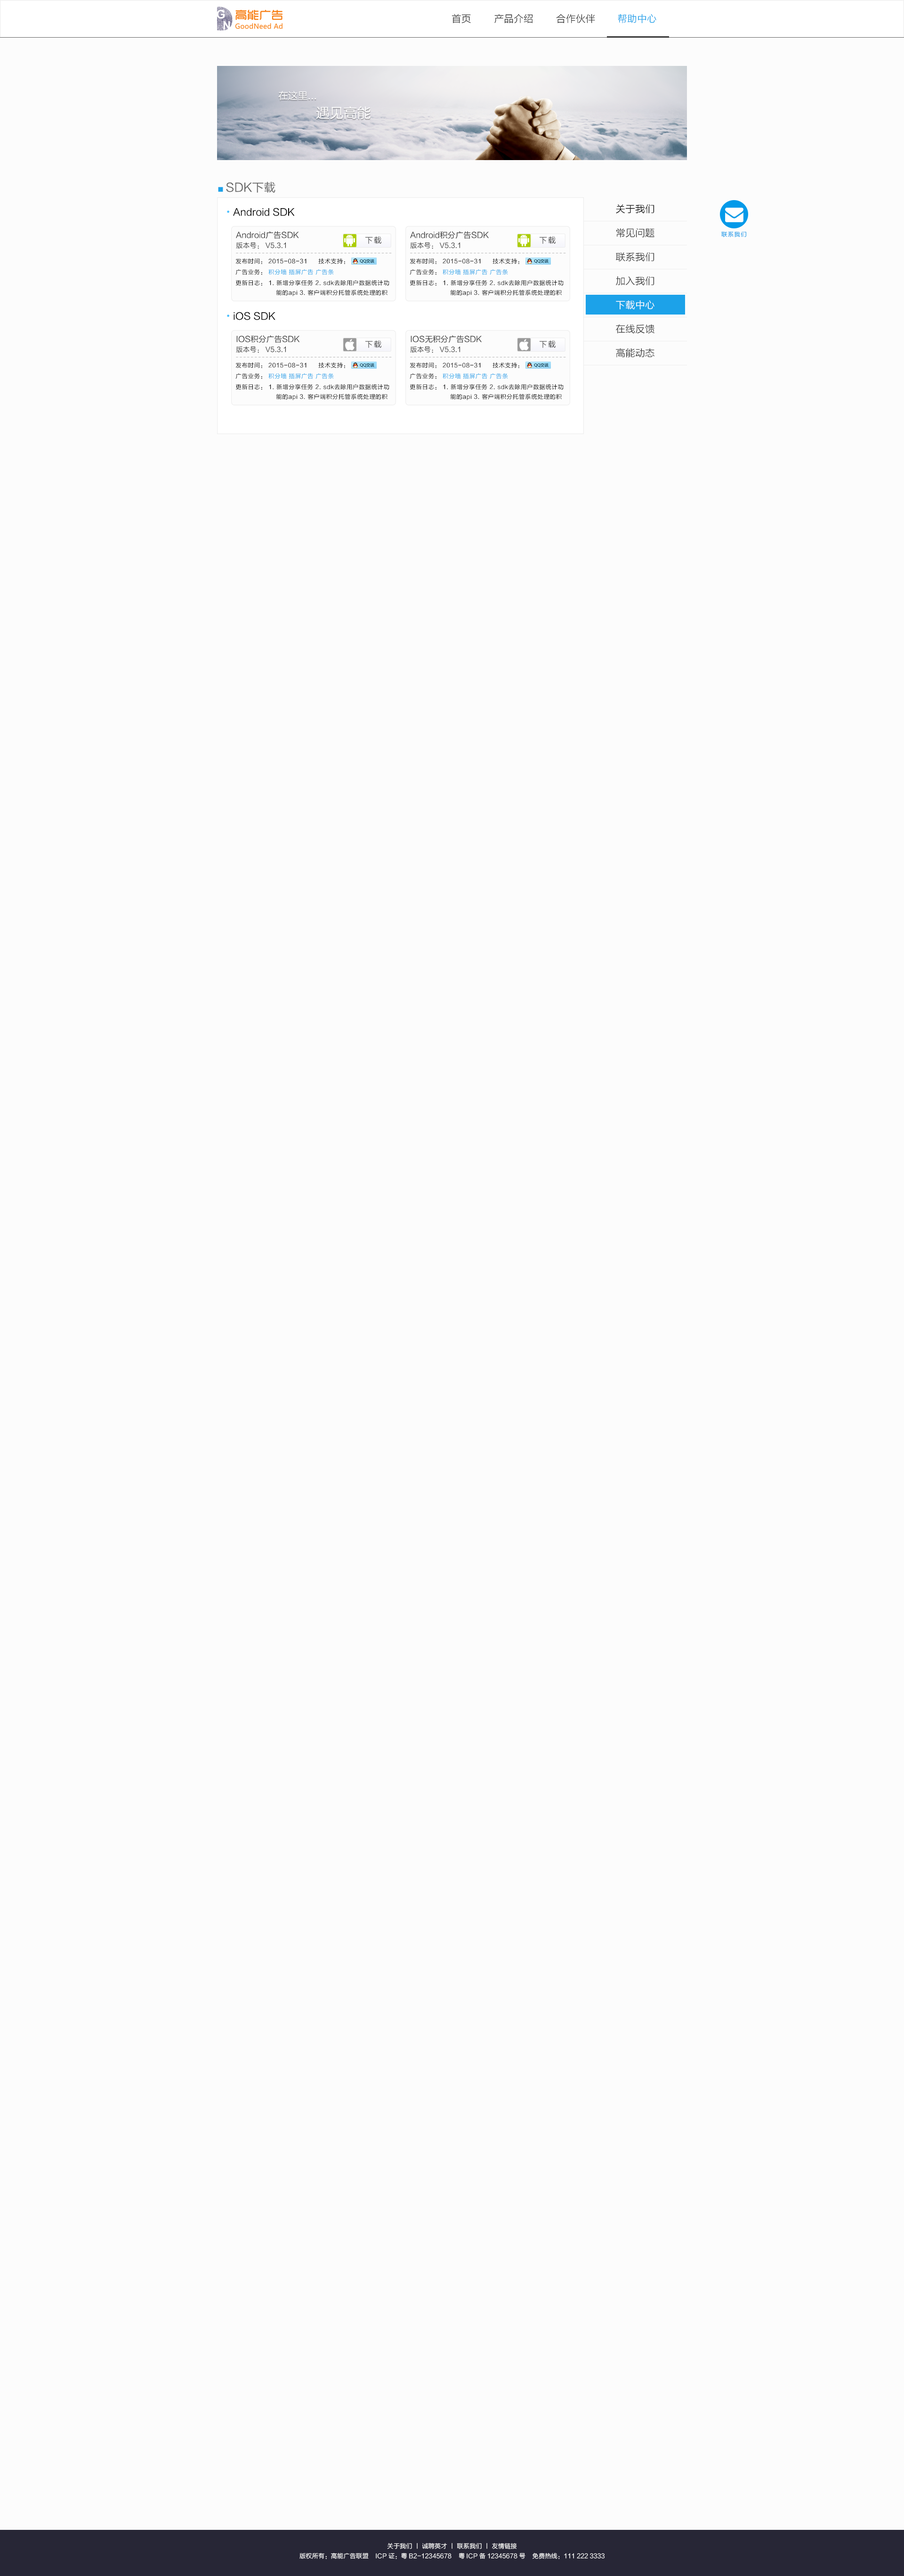
<style>
.page{position:relative;width:904px;height:2576px;background:#fcfcfc}
.page>*{position:absolute;margin:0}
.t1{font:9.8px "FZLTXHK";color:#333333}
.t2{font:9.8px "FZLTXHK";color:#1ca2e9}
.t3{font:9.8px "FZLTHK--GBK1-0";color:#fcfcfc}
.t4{font:13.7px "FZLTHK--GBK1-0";color:#fcfcfc}
.t5{font:11.8px "FZLTHK--GBK1-0";color:#666666}
.t6{font:5.9px "FZLTHK--GBK1-0";color:#1ca2e9}
.t7{font:9.8px "FZLTHK--GBK1-0";color:#000000}
.t8{font:9.8px "AdobeHeitiStd-Regular";color:#47c0ff}
.t9{font:9.8px "FZLTXHK";color:#000000}
.t10{font:8px/9.9px "FZLTHK--GBK1-0";color:#333333}
.t11{font:7px/9.9px "FZLTHK--GBK1-0";color:#333333}
.t12{font:5.9px "FZLTXHK";letter-spacing:0.1em;color:#039ae9}
.t13{font:8px "FZLTXHK";letter-spacing:0.1em}
.t14{font:3.9px "FZLTHK--GBK1-0";letter-spacing:0.3em}
.t15{font:5.9px "FZLTHK--GBK1-0";letter-spacing:0.05em;color:#010101}
.t16{font:5.9px "FZLTHK--GBK1-0";letter-spacing:0.05em;color:#1ca2e9}
.t17{font:5.9px/9.8px "FZLTHK--GBK1-0";letter-spacing:0.05em;color:#010101}
.t18{font:9.8px "FZLTXHK";color:#ffffff}
.t19{font:6.3px "FZLTXHK";color:#ffffff}
</style>
<div class="page">
<p class="t1" style="left:452px;top:14px;width:19px;height:10px">首页</p>
<p class="t1" style="left:494px;top:14px;width:39px;height:10px">产品介绍</p>
<p class="t1" style="left:556px;top:14px;width:39px;height:10px">合作伙伴</p>
<p class="t2" style="left:618px;top:14px;width:38px;height:10px">帮助中心</p>
<p class="t3" style="left:278px;top:91px;width:38px;height:9px">在这里...</p>
<p class="t4" style="left:316px;top:106px;width:55px;height:13px">遇见高能</p>
<p class="t5" style="left:218px;top:182px;width:57px;height:11px"><span class="t6">■ </span>SDK下载</p>
<p class="t7" style="left:227px;top:208px;width:68px;height:8px"><span class="t8">•</span>Android SDK</p>
<p class="t9" style="left:616px;top:204px;width:38px;height:10px">关于我们</p>
<p class="t10" style="left:236px;top:231px;width:63px;height:18px">Android广告SDK <br><span class="t11">版本号： V5.3.1</span></p>
<p class="t10" style="left:410px;top:231px;width:79px;height:18px">Android积分广告SDK <br><span class="t11">版本号： V5.3.1</span></p>
<p class="t1" style="left:616px;top:228px;width:38px;height:10px">常见问题</p>
<p class="t12" style="left:721px;top:231px;width:25px;height:6px">联系我们</p>
<p class="t13" style="left:365px;top:236px;width:16px;height:8px">下载</p>
<p class="t13" style="left:539px;top:236px;width:17px;height:8px">下载</p>
<p class="t14" style="left:236px;top:253px;width:156px;height:0px">------------------------------------------</p>
<p class="t14" style="left:410px;top:253px;width:156px;height:0px">------------------------------------------</p>
<p class="t1" style="left:616px;top:252px;width:38px;height:10px">联系我们</p>
<p class="t15" style="left:235px;top:258px;width:72px;height:6px">发布时间： 2015-08-31</p>
<p class="t16" style="left:235px;top:269px;width:99px;height:6px"><span class="t15">广告业务： </span>积分墙 插屏广告 广告条</p>
<p class="t15" style="left:318px;top:258px;width:27px;height:6px">技术支持：</p>
<p class="t15" style="left:410px;top:258px;width:71px;height:6px">发布时间： 2015-08-31</p>
<p class="t16" style="left:410px;top:269px;width:98px;height:6px"><span class="t15">广告业务： </span>积分墙 插屏广告 广告条</p>
<p class="t15" style="left:493px;top:258px;width:26px;height:6px">技术支持：</p>
<p class="t17" style="left:235px;top:280px;width:154px;height:16px">更新日志： 1. 新增分享任务 2. sdk去除用户数据统计功<br>                     能的api 3. 客户端积分托管系统处理的积</p>
<p class="t17" style="left:410px;top:280px;width:154px;height:16px">更新日志： 1. 新增分享任务 2. sdk去除用户数据统计功<br>                     能的api 3. 客户端积分托管系统处理的积</p>
<p class="t1" style="left:616px;top:276px;width:38px;height:9px">加入我们</p>
<p class="t18" style="left:616px;top:300px;width:38px;height:10px">下载中心</p>
<p class="t7" style="left:227px;top:312px;width:48px;height:8px"><span class="t8">•</span>iOS SDK</p>
<p class="t1" style="left:616px;top:324px;width:38px;height:10px">在线反馈</p>
<p class="t11" style="left:236px;top:335px;width:64px;height:18px"><span class="t10">IOS积分广告SDK <br></span>版本号： V5.3.1</p>
<p class="t13" style="left:365px;top:340px;width:16px;height:8px">下载</p>
<p class="t10" style="left:410px;top:335px;width:72px;height:18px">IOS无积分广告SDK <br><span class="t11">版本号： V5.3.1</span></p>
<p class="t13" style="left:539px;top:340px;width:17px;height:8px">下载</p>
<p class="t1" style="left:616px;top:348px;width:38px;height:9px">高能动态</p>
<p class="t15" style="left:235px;top:362px;width:72px;height:6px">发布时间： 2015-08-31</p>
<p class="t14" style="left:236px;top:357px;width:156px;height:0px">------------------------------------------</p>
<p class="t15" style="left:318px;top:362px;width:27px;height:6px">技术支持：</p>
<p class="t15" style="left:410px;top:362px;width:71px;height:6px">发布时间： 2015-08-31</p>
<p class="t14" style="left:410px;top:357px;width:156px;height:0px">------------------------------------------</p>
<p class="t15" style="left:493px;top:362px;width:26px;height:6px">技术支持：</p>
<p class="t16" style="left:235px;top:373px;width:99px;height:6px"><span class="t15">广告业务： </span>积分墙 插屏广告 广告条</p>
<p class="t16" style="left:410px;top:373px;width:98px;height:6px"><span class="t15">广告业务： </span>积分墙 插屏广告 广告条</p>
<p class="t17" style="left:235px;top:384px;width:154px;height:16px">更新日志： 1. 新增分享任务 2. sdk去除用户数据统计功<br>                     能的api 3. 客户端积分托管系统处理的积</p>
<p class="t17" style="left:410px;top:384px;width:154px;height:16px">更新日志： 1. 新增分享任务 2. sdk去除用户数据统计功<br>                     能的api 3. 客户端积分托管系统处理的积</p>
<p class="t19" style="left:387px;top:2543px;width:130px;height:6px">关于我们 丨 诚聘英才 丨 联系我们 丨 友情链接</p>
<p class="t19" style="left:299px;top:2552px;width:306px;height:7px">版权所有：高能广告联盟    ICP证：粤B2-12345678    粤ICP备12345678号    免费热线：111 222 3333</p>
</div>
